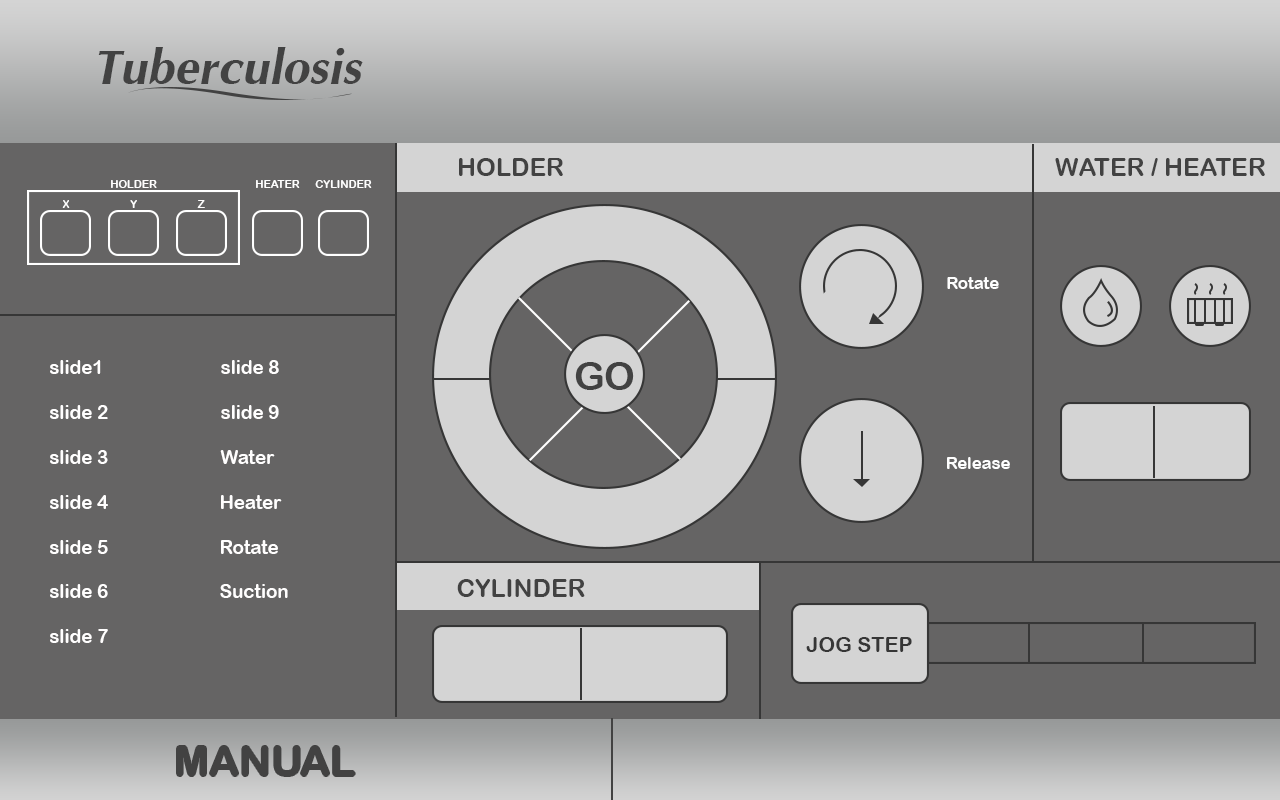
<style>
.page{position:relative;width:1280px;height:800px;background:#656464}
.page>*{position:absolute;margin:0}
.t1{font:75px "IrisUPCBoldItalic";color:#424242}
.t2{font:25px "ArialRoundedMTBold";color:#424242}
.t3{font:10.9px "ArialRoundedMTBold";color:#fffefe}
.t4{font:10.9px "ArialRoundedMTBold";color:#ffffff}
.t5{font:10.9px "ArialRoundedMTBold";color:#fdfdfd}
.t6{font:10.9px "ArialRoundedMTBold";color:#fefdfd}
.t7{font:16.7px "ArialRoundedMTBold";color:#fefefe}
.t8{font:18.7px "ArialRoundedMTBold";color:#fffefe}
.t9{font:38.5px "ArialRoundedMTBold";color:#424242}
.t10{font:20.8px "ArialRoundedMTBold";color:#363636}
.t11{font:41.7px "ArialRoundedMTBold";color:#424242}
</style>
<div class="page">
<p class="t1" style="left:98px;top:47px;width:265px;height:37px">Tuberculosis</p>
<p class="t2" style="left:459px;top:158px;width:104px;height:18px">HOLDER</p>
<p class="t2" style="left:1055px;top:158px;width:210px;height:18px">WATER / HEATER</p>
<p class="t3" style="left:111px;top:180px;width:46px;height:8px">HOLDER</p>
<p class="t4" style="left:256px;top:180px;width:44px;height:8px">HEATER</p>
<p class="t5" style="left:315px;top:180px;width:57px;height:8px">CYLINDER</p>
<p class="t5" style="left:62px;top:200px;width:8px;height:8px">X</p>
<p class="t4" style="left:130px;top:200px;width:7px;height:8px">Y</p>
<p class="t6" style="left:197px;top:200px;width:8px;height:8px">Z</p>
<p class="t7" style="left:947px;top:277px;width:52px;height:12px">Rotate</p>
<p class="t8" style="left:50px;top:360px;width:51px;height:14px">slide1</p>
<p class="t8" style="left:221px;top:360px;width:58px;height:14px">slide 8</p>
<p class="t9" style="left:575px;top:362px;width:59px;height:28px">GO</p>
<p class="t8" style="left:50px;top:405px;width:58px;height:14px">slide 2</p>
<p class="t8" style="left:221px;top:405px;width:58px;height:14px">slide 9</p>
<p class="t8" style="left:50px;top:450px;width:58px;height:14px">slide 3</p>
<p class="t8" style="left:220px;top:450px;width:55px;height:14px">Water</p>
<p class="t7" style="left:947px;top:457px;width:63px;height:12px">Release</p>
<p class="t8" style="left:50px;top:495px;width:58px;height:14px">slide 4</p>
<p class="t8" style="left:221px;top:495px;width:61px;height:14px">Heater</p>
<p class="t8" style="left:50px;top:540px;width:58px;height:14px">slide 5</p>
<p class="t8" style="left:221px;top:540px;width:57px;height:14px">Rotate</p>
<p class="t2" style="left:457px;top:579px;width:128px;height:18px">CYLINDER</p>
<p class="t8" style="left:50px;top:584px;width:58px;height:14px">slide 6</p>
<p class="t8" style="left:220px;top:584px;width:68px;height:14px">Suction</p>
<p class="t8" style="left:50px;top:629px;width:58px;height:14px">slide 7</p>
<p class="t10" style="left:806px;top:637px;width:106px;height:15px">JOG STEP</p>
<p class="t11" style="left:177px;top:746px;width:178px;height:30px">MANUAL</p>
</div>
